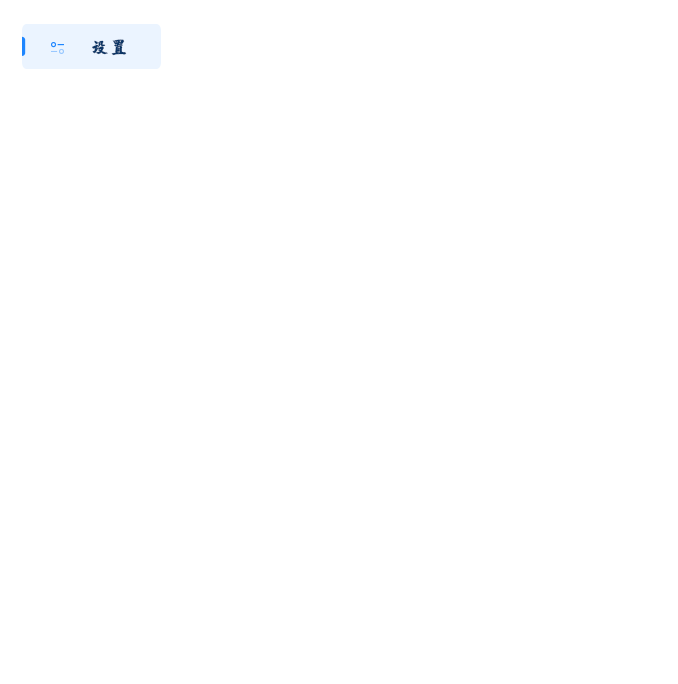
<style>
.page{position:relative;width:678px;height:684px;background:#ffffff}
.page>*{position:absolute;margin:0}
.t1{font:19.2px "zihun24hao-zhenhunshoushu";letter-spacing:0.002em;color:#0c3666}
</style>
<div class="page">
<p class="t1" style="left:92px;top:39px;width:35px;height:17px">设置</p>
</div>
